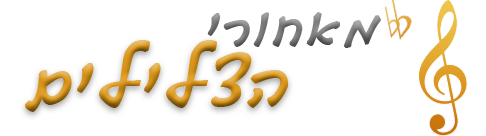
<style>
.page{position:relative;width:486px;height:136px;background:#ffffff}
.page>*{position:absolute;margin:0}
.t1{font:50px "GuttmanYad-Brush";color:#7c7c7c}
.t2{font:66.7px "GuttmanYad-Brush";color:#da9619}
</style>
<div class="page">
<p class="t1" style="left:207px;top:12px;width:174px;height:36px">ירוחאמ</p>
<p class="t2" style="left:25px;top:40px;width:263px;height:72px">םילילצה</p>
</div>
